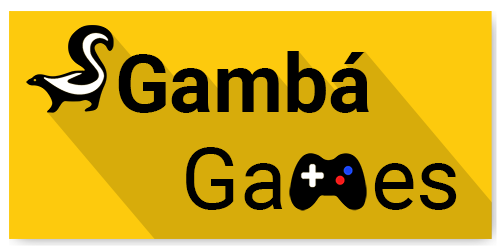
<style>
.page{position:relative;width:500px;height:250px;background:#fdca0d}
.page>*{position:absolute;margin:0}
.t1{font:80.7px "Roboto-Bold";color:#000000}
.t2{font:85.6px "Roboto-Regular";color:#000000}
</style>
<div class="page">
<p class="t1" style="left:118px;top:51px;width:251px;height:62px">Gambá</p>
<p class="t2" style="left:186px;top:147px;width:271px;height:63px">Ga    es</p>
</div>
